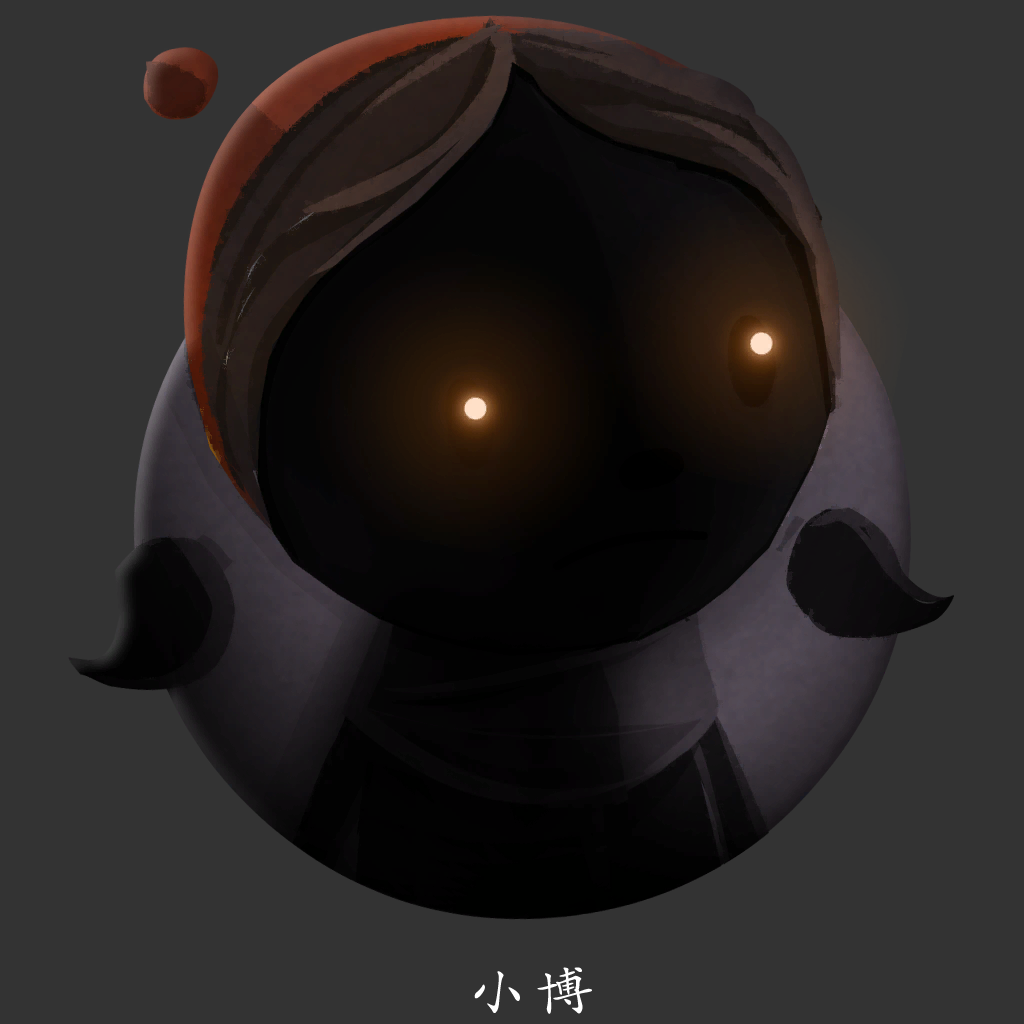
<style>
.page{position:relative;width:1024px;height:1024px;background:#333333}
.page>*{position:absolute;margin:0}
.t1{font:53.3px "STKaiti";letter-spacing:0.1em;color:#ffffff}
</style>
<div class="page">
<p class="t1" style="left:474px;top:967px;width:118px;height:47px">小博</p>
</div>
